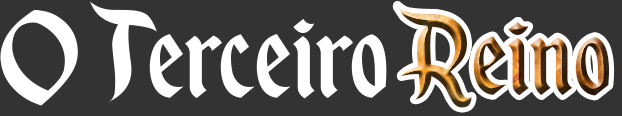
<style>
.page{position:relative;width:622px;height:116px;background:#333333}
.page>*{position:absolute;margin:0}
.t1{font:147px "EnchantedLand";color:#ffffff;scale:0.92 1}
.t2{font:134.7px "EnchantedLand";scale:0.97 1}
</style>
<div class="page">
<p class="t1" style="left:0px;top:1px;width:387px;height:105px">O  Terceiro</p>
<p class="t2" style="left:397px;top:5px;width:213px;height:103px">Reino</p>
</div>
